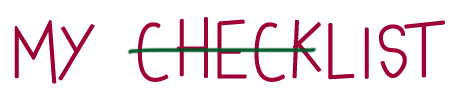
<style>
.page{position:relative;width:460px;height:99px;background:#ffffff}
.page>*{position:absolute;margin:0}
.t1{font:72px "MyaPapaya";color:#9e0039;font-weight:bold}
</style>
<div class="page">
<p class="t1" style="left:14px;top:17px;width:431px;height:67px">My Checklist</p>
</div>
